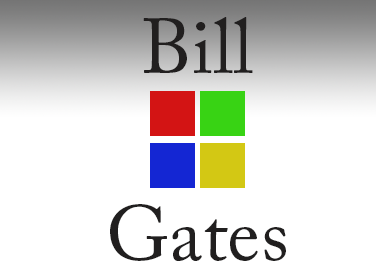
<style>
.page{position:relative;width:376px;height:275px;background:#ffffff}
.page>*{position:absolute;margin:0}
.t1{font:78px "ACaslonPro-Regular";color:#211f1f}
</style>
<div class="page">
<p class="t1" style="left:110px;top:17px;width:176px;height:244px;text-align:center">Bill<br><br>Gates</p>
</div>
